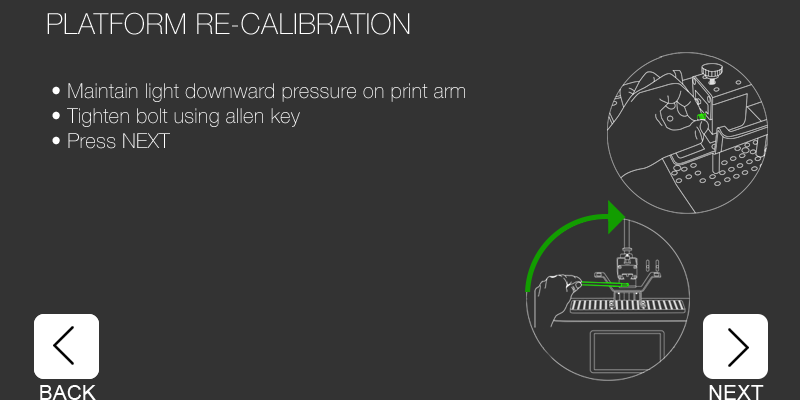
<style>
.page{position:relative;width:800px;height:400px;background:#333333}
.page>*{position:absolute;margin:0}
.t1{font:20.8px "HelveticaNeue-Thin";color:#ffffff}
</style>
<div class="page">
<p class="t1" style="left:52px;top:83px;width:413px;height:66px">• Maintain light downward pressure on print arm<br>• Tighten bolt using allen key<br>• Press NEXT</p>
</div>
